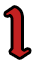
<style>
.page{position:relative;width:32px;height:69px;background:#ffffff}
.page>*{position:absolute;margin:0}
.t1{font:72px "OldEnglishTextMT";color:#c22121}
</style>
<div class="page">
<p class="t1" style="left:6px;top:8px;width:23px;height:49px">1</p>
</div>
